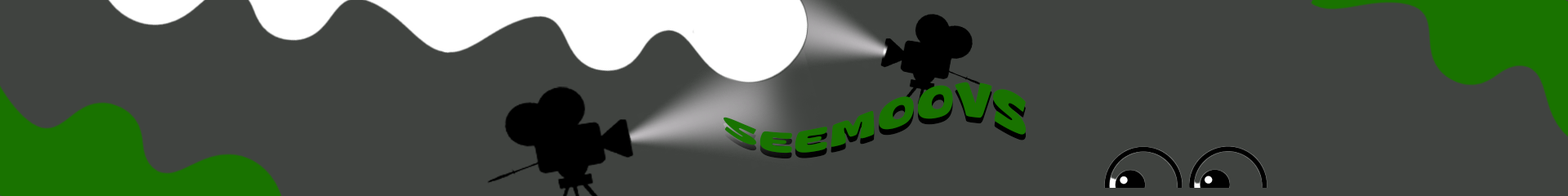
<style>
.page{position:relative;width:1568px;height:196px;background:#404340}
.page>*{position:absolute;margin:0}
.t1{font:36.1px "Winie-Beige";scale:1.6 1}
.t2{font:36.1px "Winie-Beige";color:#197300;scale:1.6 1}
</style>
<div class="page">
<p class="t1" style="left:724px;top:87px;width:303px;height:72px">SeeMoovs</p>
<p class="t2" style="left:724px;top:82px;width:303px;height:72px">SeeMoovs</p>
</div>
